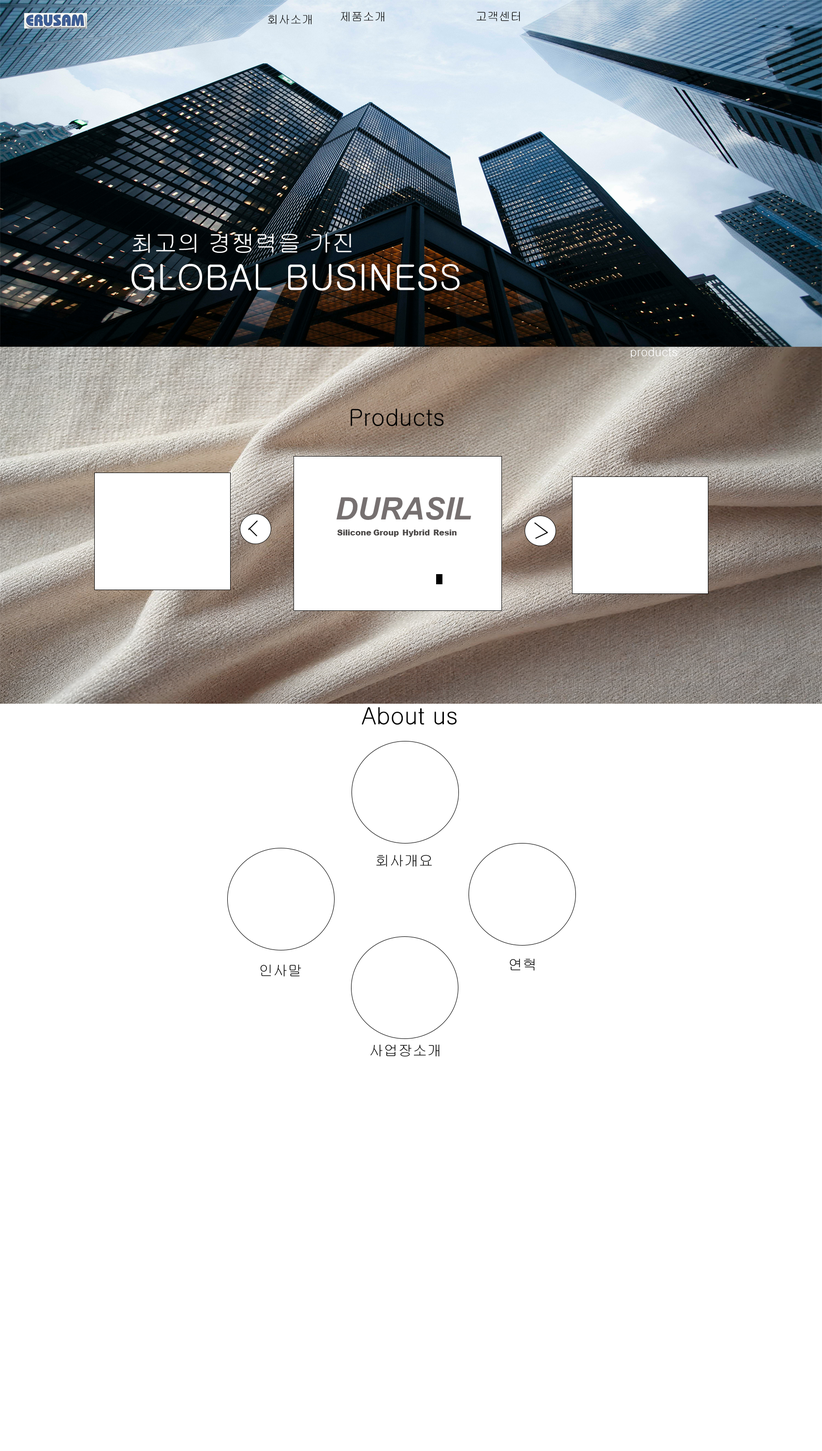
<style>
.page{position:relative;width:822px;height:1451px;background:#ffffff}
.page>*{position:absolute;margin:0}
.t1{font:11.6px "Gulim";color:#010101}
.t2{font:11.6px "Gulim";color:#000000}
.t3{font:23.2px "Gulim";color:#ffffff}
.t4{font:34.8px "Gulim";color:#ffffff;font-weight:bold}
.t5{font:34.8px "Gulim";color:#ffffff}
.t6{font:11.6px "Gulim";color:#ffffff}
.t7{font:23.2px "Gulim";color:#000000}
.t8{font:14.5px "Gulim";color:#000000}
</style>
<div class="page">
<p class="t1" style="left:268px;top:15px;width:44px;height:10px">회사소개</p>
<p class="t2" style="left:340px;top:12px;width:44px;height:10px">제품소개</p>
<p class="t2" style="left:476px;top:12px;width:44px;height:9px">고객센터</p>
<p class="t3" style="left:132px;top:234px;width:220px;height:19px">최고의 경쟁력을 가진</p>
<p class="t4" style="left:132px;top:264px;width:328px;height:27px">GLOBAL BUSINES<span class="t5">S</span></p>
<p class="t6" style="left:631px;top:347px;width:46px;height:11px">products</p>
<p class="t7" style="left:351px;top:408px;width:93px;height:18px">Products</p>
<p class="t7" style="left:362px;top:707px;width:95px;height:18px">About us</p>
<p class="t8" style="left:376px;top:854px;width:56px;height:13px">회사개요</p>
<p class="t8" style="left:260px;top:964px;width:41px;height:12px">인사말</p>
<p class="t8" style="left:510px;top:958px;width:25px;height:12px">연혁</p>
<p class="t8" style="left:370px;top:1044px;width:70px;height:13px">사업장소개</p>
</div>
